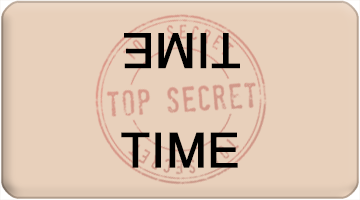
<style>
.page{position:relative;width:360px;height:200px;background:#e8d0bb}
.page>*{position:absolute;margin:0}
.t1{font:48px "ArialMT";color:#000000;font-weight:bold}
</style>
<div class="page">
<p class="t1" style="left:124px;top:33px;width:116px;height:36px;rotate:180deg">TIME</p>
<p class="t1" style="left:121px;top:132px;width:117px;height:36px">TIME</p>
</div>
